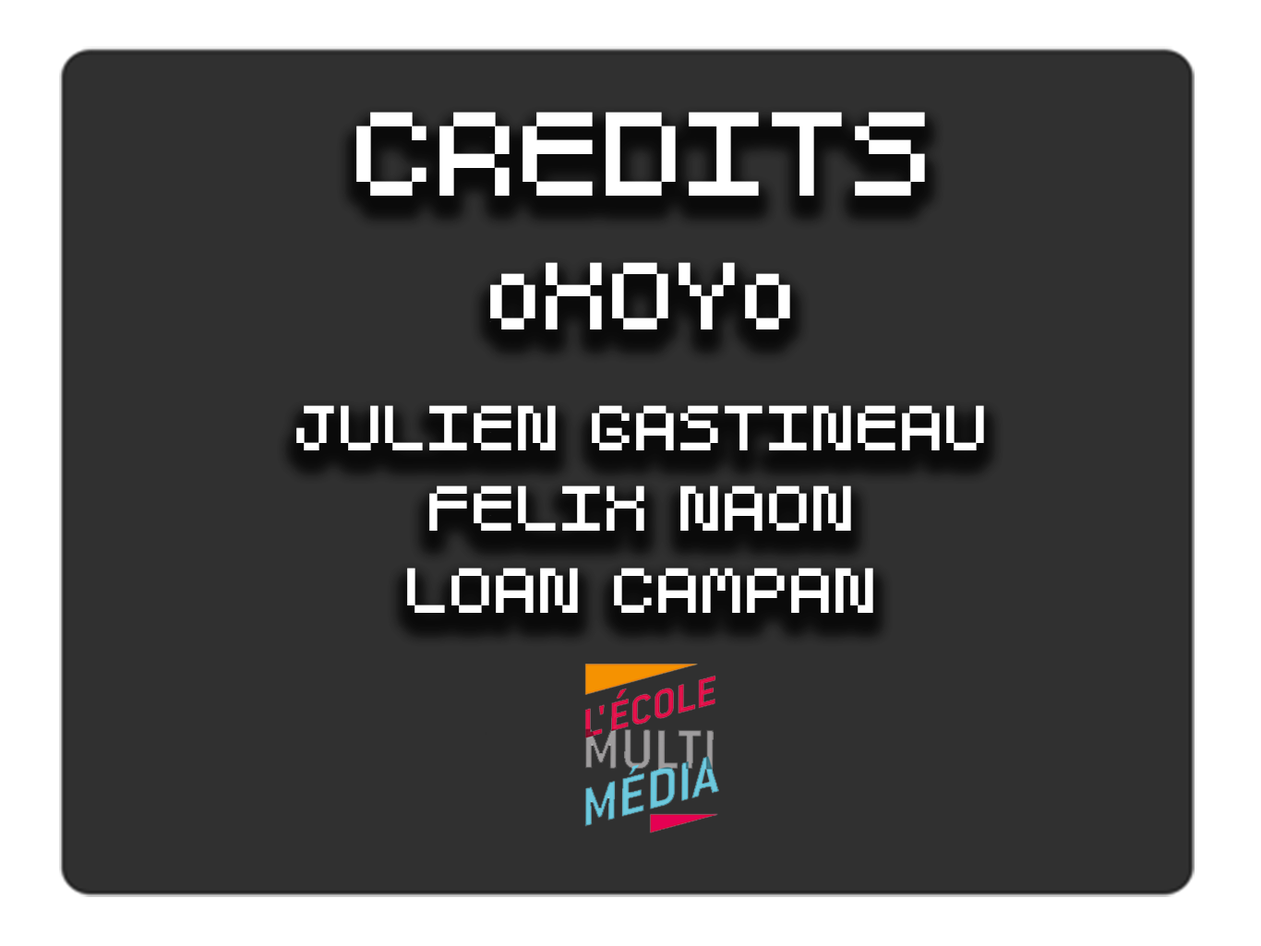
<style>
.page{position:relative;width:1261px;height:946px;background:#303030}
.page>*{position:absolute;margin:0}
.t1{font:110.7px "GoldyRoundNormal";color:#ffffff}
.t2{font:88.6px "GoldyRoundNormal";color:#ffffff}
.t3{font:59.1px "GoldyRoundNormal";color:#ffffff}
</style>
<div class="page">
<p class="t1" style="left:356px;top:112px;width:569px;height:84px">CREDITS</p>
<p class="t2" style="left:490px;top:262px;width:300px;height:67px">oXOYo</p>
<p class="t3" style="left:296px;top:405px;width:688px;height:45px">JULIEN GASTINEAU</p>
<p class="t3" style="left:429px;top:485px;width:422px;height:46px">FELIX NAON</p>
<p class="t3" style="left:407px;top:568px;width:466px;height:45px">LOAN CAMPAN</p>
</div>
